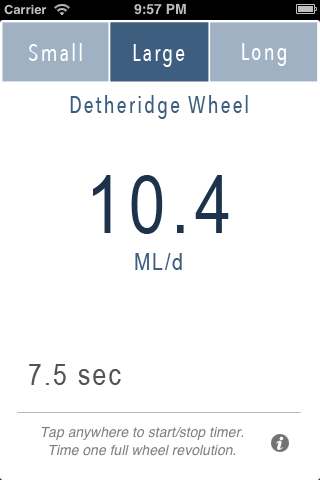
<style>
.page{position:relative;width:320px;height:480px;background:#ffffff}
.page>*{position:absolute;margin:0}
.t1{font:24px "AvenirNextCondensed-Regular";letter-spacing:0.075em;color:#ffffff}
.t2{font:24px "AvenirNextCondensed-Regular";letter-spacing:0.075em;color:#3e5e80}
.t3{font:80px "ArialNarrow";letter-spacing:0.075em;color:#1d334b}
.t4{font:24px "ArialNarrow";letter-spacing:0.075em;color:#3e5e80}
.t5{font:30px "ArialNarrow";letter-spacing:0.075em;color:#535353}
</style>
<div class="page">
<p class="t1" style="left:28px;top:43px;width:54px;height:18px">Small</p>
<p class="t1" style="left:133px;top:44px;width:52px;height:23px">Large</p>
<p class="t1" style="left:242px;top:43px;width:44px;height:23px">Long</p>
<p class="t2" style="left:70px;top:95px;width:178px;height:24px">Detheridge Wheel</p>
<p class="t3" style="left:93px;top:175px;width:136px;height:59px">10.4</p>
<p class="t4" style="left:135px;top:253px;width:47px;height:17px">ML/d</p>
<p class="t5" style="left:29px;top:364px;width:92px;height:21px">7.5 sec</p>
</div>
